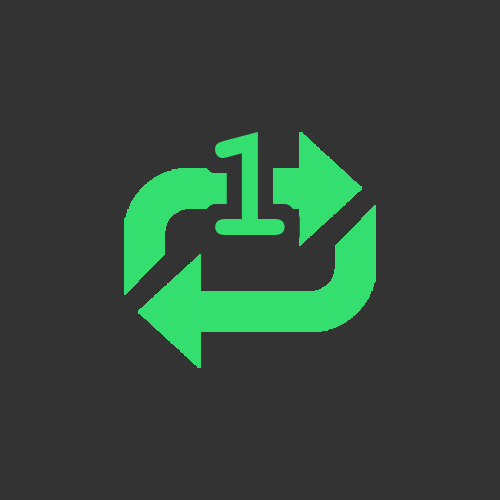
<style>
.page{position:relative;width:500px;height:500px;background:#333333}
.page>*{position:absolute;margin:0}
.t1{font:159.4px "CourierNewPS-BoldMT";color:#34df70}
</style>
<div class="page">
<p class="t1" style="left:215px;top:132px;width:70px;height:103px">1</p>
</div>
